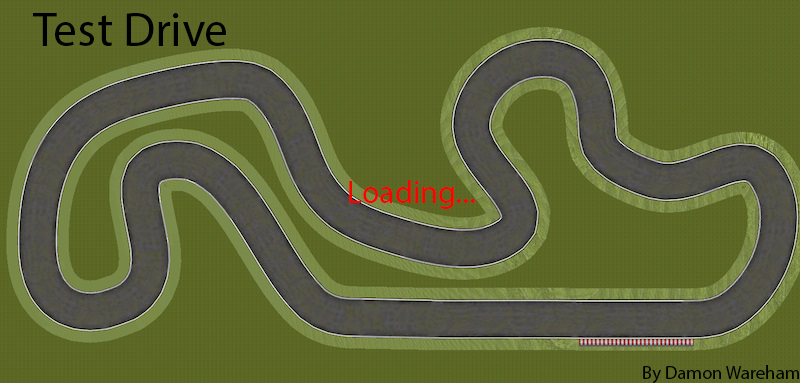
<style>
.page{position:relative;width:800px;height:383px}
.page>*{position:absolute;margin:0}
.t1{font:48px "MyriadPro-Regular";color:#000000}
.t2{font:32px "MyriadPro-Regular";color:#ff0000}
.t3{font:18.7px "MyriadPro-Regular";color:#000000}
</style>
<div class="page">
<p class="t1" style="left:33px;top:13px;width:193px;height:33px">Test Drive</p>
<p class="t2" style="left:349px;top:180px;width:126px;height:29px">Loading...</p>
<p class="t3" style="left:643px;top:365px;width:156px;height:19px">By Damon Wareham</p>
</div>
